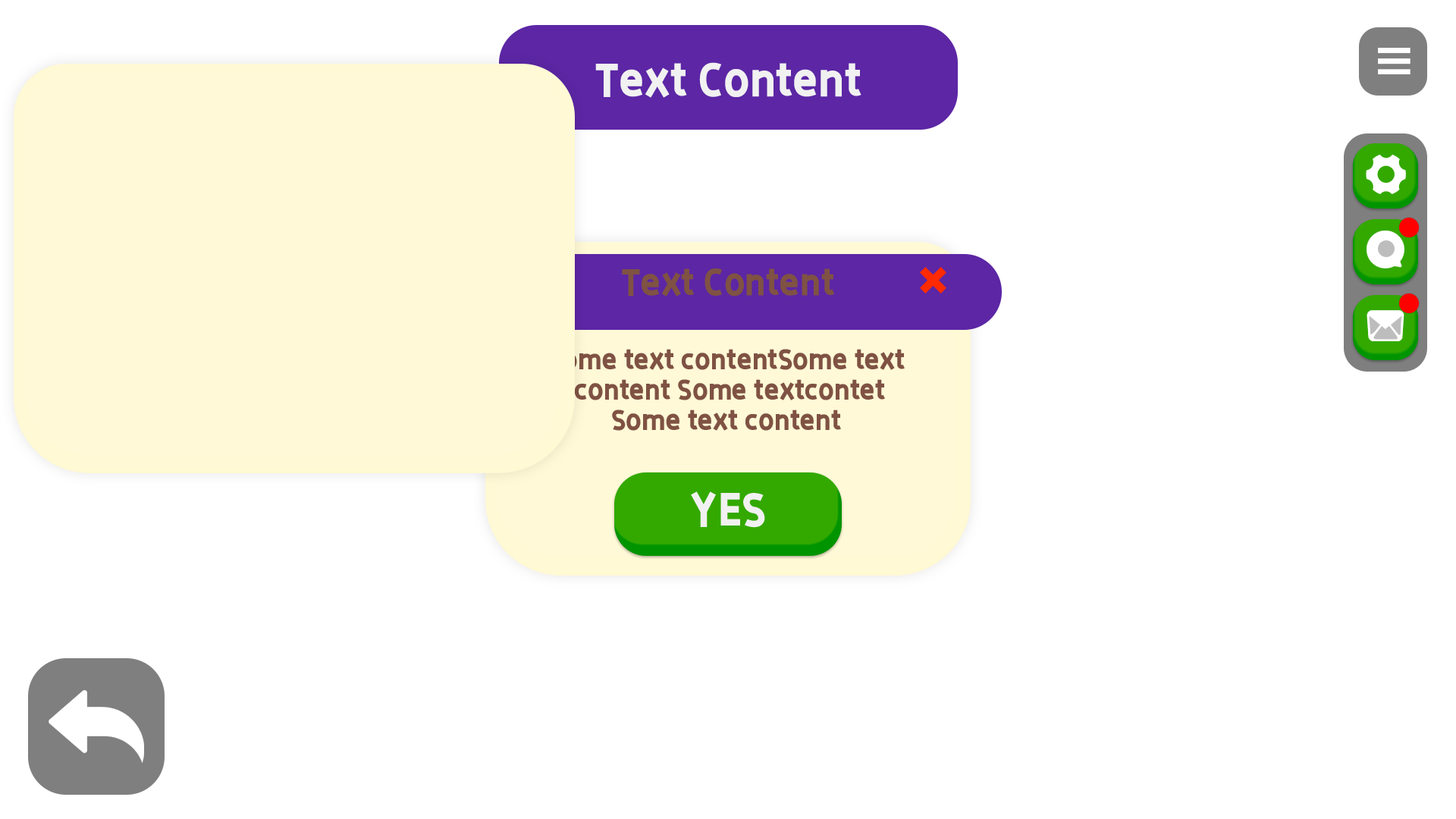
<style>
.page{position:relative;width:1456px;height:819px;background:#ffffff}
.page>*{position:absolute;margin:0}
.t1{font:45.5px "ZiZhiQuXiMaiTi";color:#f1f1f1}
.t2{font:36.4px "ZiZhiQuXiMaiTi";color:#7f5243}
.t3{font:27.3px/30.3px "ZiZhiQuXiMaiTi";color:#7f5243}
</style>
<div class="page">
<p class="t1" style="left:595px;top:62px;width:266px;height:36px">Text Content</p>
<p class="t2" style="left:622px;top:268px;width:212px;height:29px">Text Content</p>
<p class="t3" style="left:548px;top:349px;width:357px;height:82px;text-align:center">Some text contentSome text<br> content Some textcontet<br>Some text content</p>
<p class="t1" style="left:691px;top:491px;width:74px;height:37px">YES</p>
</div>
